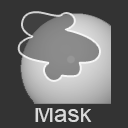
<style>
.page{position:relative;width:128px;height:128px;background:#333333}
.page>*{position:absolute;margin:0}
.t1{font:24px "ArialMT";color:#dadada}
</style>
<div class="page">
<p class="t1" style="left:35px;top:105px;width:57px;height:17px">Mask</p>
</div>
